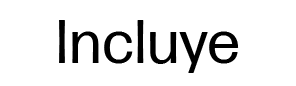
<style>
.page{position:relative;width:296px;height:86px;background:#ffffff}
.page>*{position:absolute;margin:0}
.t1{font:60px "FormaDJRMicro-Regular";color:#000000}
</style>
<div class="page">
<p class="t1" style="left:59px;top:20px;width:180px;height:53px">Incluye</p>
</div>
